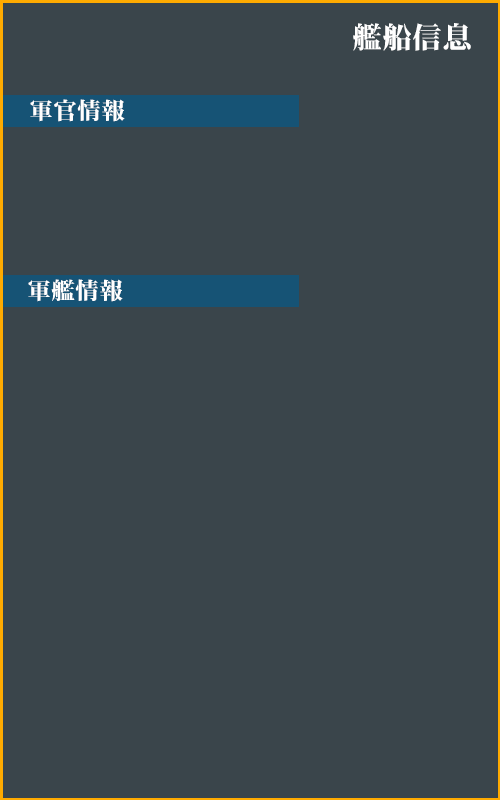
<style>
.page{position:relative;width:500px;height:800px;background:#3a454b}
.page>*{position:absolute;margin:0}
.t1{font:30px "FGPHeiseiMincho-W9";color:#ffffff}
.t2{font:24px "FGPHeiseiMincho-W9";color:#ffffff}
</style>
<div class="page">
<p class="t1" style="left:353px;top:23px;width:118px;height:28px">艦船信息</p>
<p class="t2" style="left:30px;top:99px;width:95px;height:23px">軍官情報</p>
<p class="t2" style="left:28px;top:279px;width:95px;height:23px">軍艦情報</p>
</div>
